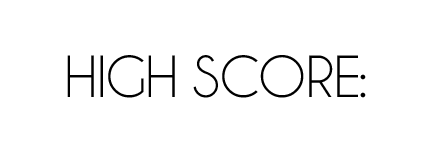
<style>
.page{position:relative;width:432px;height:144px;background:#ffffff}
.page>*{position:absolute;margin:0}
.t1{font:60px "Champagne&Limousines";color:#000000}
</style>
<div class="page">
<p class="t1" style="left:67px;top:55px;width:299px;height:43px">HIGH SCORE:</p>
</div>
